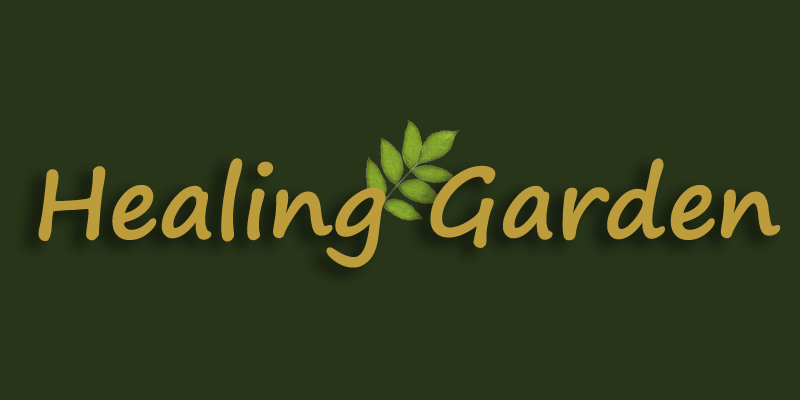
<style>
.page{position:relative;width:800px;height:400px;background:#283519}
.page>*{position:absolute;margin:0}
.t1{font:95.8px "SegoePrint-Bold";color:#bc9c3b}
</style>
<div class="page">
<p class="t1" style="left:38px;top:158px;width:743px;height:110px">Healing Garden</p>
</div>
